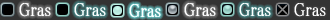
<style>
.page{position:relative;width:330px;height:20px;background:#333333}
.page>*{position:absolute;margin:0}
.t1{font:19px "MS-PMincho";color:#ffffff;font-weight:bold;scale:0.84 1}
</style>
<div class="page">
<p class="t1" style="left:19px;top:3px;width:32px;height:14px">Gras</p>
<p class="t1" style="left:74px;top:3px;width:32px;height:14px">Gras</p>
<p class="t1" style="left:129px;top:4px;width:32px;height:14px">Gras</p>
<p class="t1" style="left:184px;top:3px;width:32px;height:14px">Gras</p>
<p class="t1" style="left:239px;top:3px;width:32px;height:14px">Gras</p>
<p class="t1" style="left:294px;top:3px;width:32px;height:14px">Gras</p>
</div>
